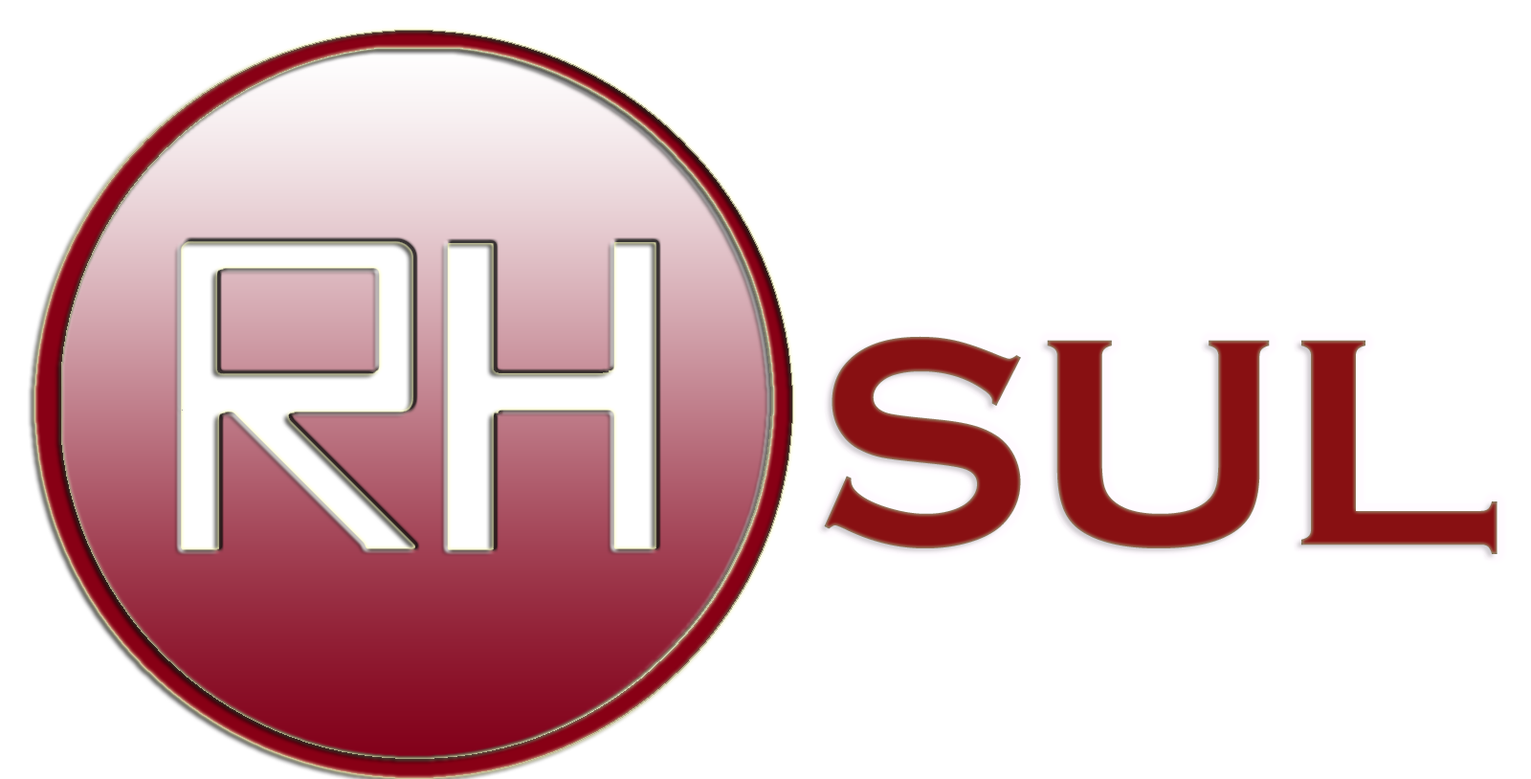
<style>
.page{position:relative;width:1531px;height:779px;background:#ffffff}
.page>*{position:absolute;margin:0}
.t1{font:306.2px "CopperplateGothic-Bold";color:#881012}
</style>
<div class="page">
<p class="t1" style="left:824px;top:336px;width:673px;height:218px">SUL</p>
</div>
